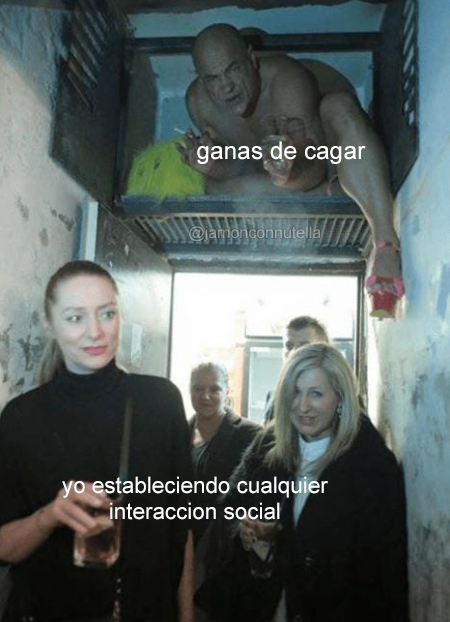
<style>
.page{position:relative;width:450px;height:622px}
.page>*{position:absolute;margin:0}
.t1{font:18.4px "ArialMT";color:#ffffff}
.t2{font:12px "ArialMT";color:#97a3a6}
.t3{font:16.8px "ArialMT";color:#ffffff}
</style>
<div class="page">
<p class="t1" style="left:197px;top:141px;width:169px;height:23px">ganas de cagar</p>
<p class="t2" style="left:189px;top:226px;width:132px;height:16px">@jamonconnutella</p>
<p class="t3" style="left:62px;top:476px;width:266px;height:44px;text-align:center">yo estableciendo cualquier<br>interaccion social</p>
</div>
